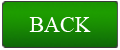
<style>
.page{position:relative;width:120px;height:50px}
.page>*{position:absolute;margin:0}
.t1{font:22px "TimesNewRomanPSMT";color:#ffffff}
</style>
<div class="page">
<p class="t1" style="left:29px;top:17px;width:62px;height:15px">BACK</p>
</div>
